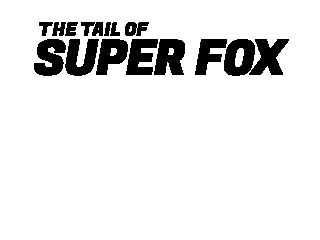
<style>
.page{position:relative;width:320px;height:240px;background:#ffffff}
.page>*{position:absolute;margin:0}
.t1{font:18px "FugazOne-Regular";letter-spacing:-0.05em;color:#000000;font-weight:bold}
.t2{font:48px "FugazOne-Regular";letter-spacing:-0.05em;color:#000000;font-weight:bold}
</style>
<div class="page">
<p class="t1" style="left:39px;top:22px;width:110px;height:14px">THE TAIL OF</p>
<p class="t2" style="left:34px;top:39px;width:255px;height:37px">SUPER FOX</p>
</div>
